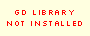
<style>
.page{position:relative;width:90px;height:36px;background:#ffffe0}
.page>*{position:absolute;margin:0}
.t1{font:9px "Silkscreen";color:#ff0000}
</style>
<div class="page">
<p class="t1" style="left:7px;top:10px;width:75px;height:16px;text-align:center">GD library<br>not installed</p>
</div>
